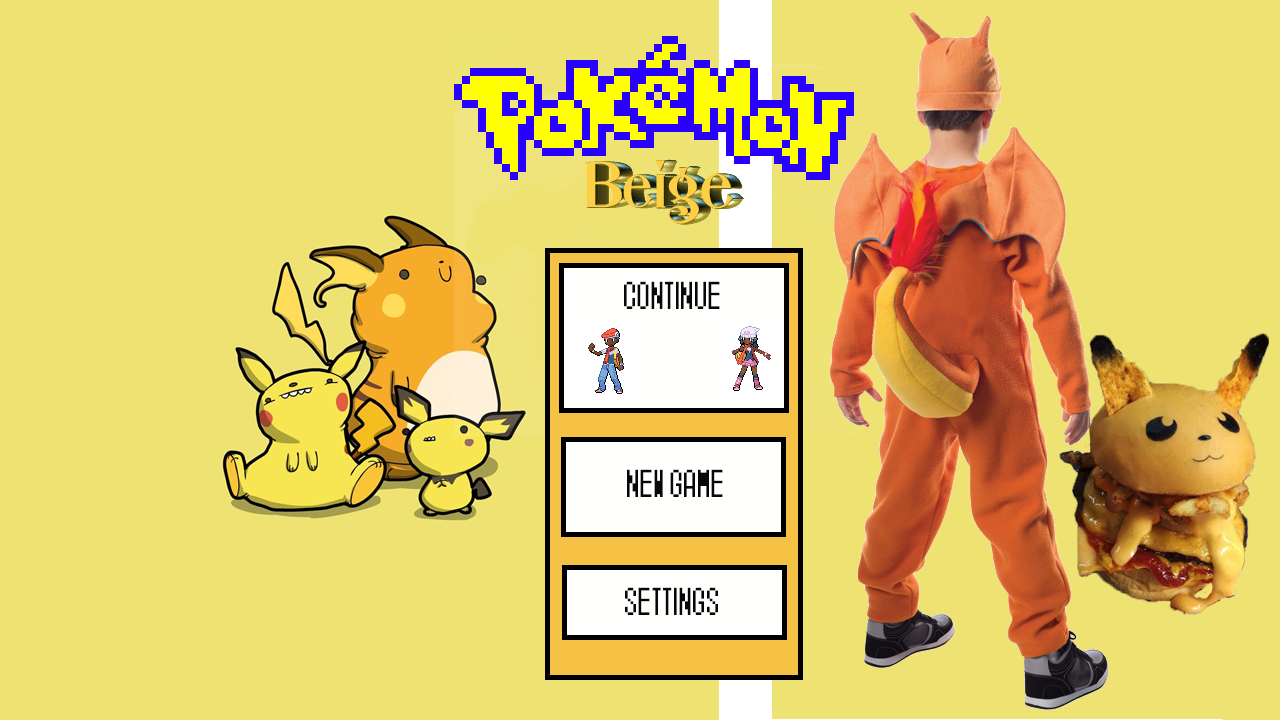
<style>
.page{position:relative;width:1280px;height:720px;background:#eee272}
.page>*{position:absolute;margin:0}
.t1{font:30px "Pokemon-X-and-Y";color:#070707}
</style>
<div class="page">
<p class="t1" style="left:624px;top:281px;width:96px;height:28px">CONTINUE</p>
<p class="t1" style="left:627px;top:469px;width:96px;height:28px">NEW GAME</p>
<p class="t1" style="left:625px;top:587px;width:93px;height:28px">SETTINGS</p>
</div>
